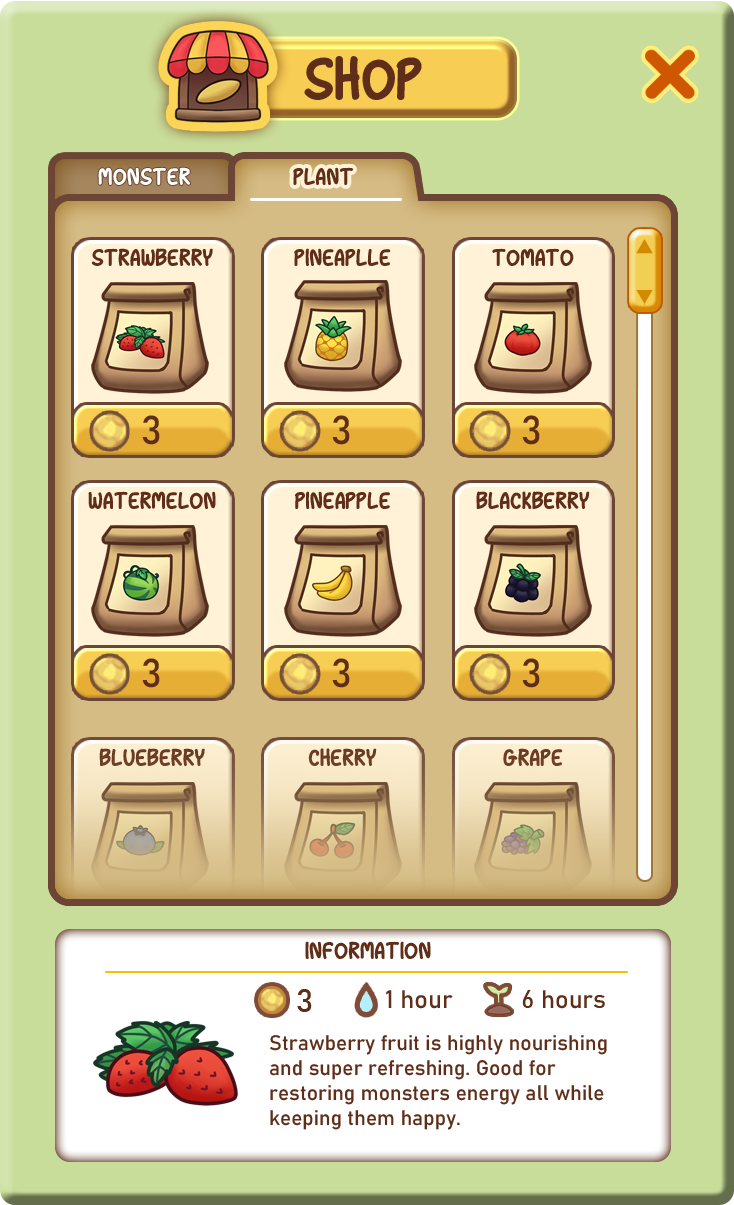
<style>
.page{position:relative;width:734px;height:1205px}
.page>*{position:absolute;margin:0}
.t1{font:62.5px "SnowDrop";color:#602e18}
.t2{font:25px "SnowDrop";color:#ffffff}
.t3{font:25px "SnowDrop";color:#602e18}
.t4{font:24.9px "SnowDrop";color:#602e18}
.t5{font:39.8px "Bahnschrift";color:#602e18}
.t6{font:33.3px "Bahnschrift";color:#602e18}
.t7{font:25px "Bahnschrift";color:#602e18}
.t8{font:20.8px "Bahnschrift";color:#602e18}
</style>
<div class="page">
<p class="t1" style="left:304px;top:56px;width:118px;height:44px">SHOP</p>
<p class="t2" style="left:98px;top:167px;width:92px;height:18px">monster</p>
<p class="t3" style="left:293px;top:167px;width:60px;height:18px">plant</p>
<p class="t4" style="left:91px;top:248px;width:122px;height:18px">Strawberry</p>
<p class="t4" style="left:294px;top:248px;width:97px;height:18px">pineaplle</p>
<p class="t4" style="left:492px;top:248px;width:82px;height:18px">tomato</p>
<p class="t5" style="left:142px;top:415px;width:18px;height:30px">3</p>
<p class="t5" style="left:332px;top:415px;width:18px;height:30px">3</p>
<p class="t5" style="left:522px;top:415px;width:18px;height:30px">3</p>
<p class="t4" style="left:88px;top:491px;width:128px;height:18px">watermelon</p>
<p class="t4" style="left:295px;top:491px;width:95px;height:18px">pineapple</p>
<p class="t4" style="left:476px;top:491px;width:114px;height:18px">blackberry</p>
<p class="t5" style="left:142px;top:658px;width:18px;height:30px">3</p>
<p class="t5" style="left:332px;top:658px;width:18px;height:30px">3</p>
<p class="t5" style="left:522px;top:658px;width:18px;height:30px">3</p>
<p class="t4" style="left:99px;top:748px;width:106px;height:18px">blueberry</p>
<p class="t4" style="left:308px;top:748px;width:69px;height:18px">cherry</p>
<p class="t4" style="left:503px;top:748px;width:60px;height:18px">grape</p>
<p class="t3" style="left:305px;top:941px;width:126px;height:18px">information</p>
<p class="t6" style="left:297px;top:989px;width:15px;height:23px">3</p>
<p class="t7" style="left:386px;top:990px;width:67px;height:19px">1 hour</p>
<p class="t7" style="left:522px;top:990px;width:83px;height:19px">6 hours</p>
<p class="t8" style="left:270px;top:1035px;width:337px;height:95px">Strawberry fruit is highly nourishing and super refreshing. Good for restoring monsters energy all while keeping them happy.</p>
</div>
